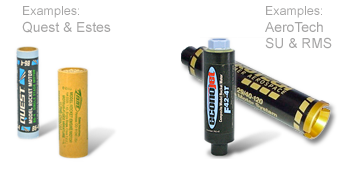
<style>
.page{position:relative;width:350px;height:170px;background:#ffffff}
.page>*{position:absolute;margin:0}
.t1{font:13.9px "ArialMT";color:#a6a5a5}
.t2{font:12.5px "ArialMT";color:#a6a5a5}
</style>
<div class="page">
<p class="t1" style="left:22px;top:6px;width:89px;height:27px"><span class="t2">Examples:<br></span>Quest &amp; Estes</p>
<p class="t1" style="left:265px;top:6px;width:67px;height:43px"><span class="t2">Examples:<br></span>AeroTech<br>SU &amp; RMS</p>
</div>
